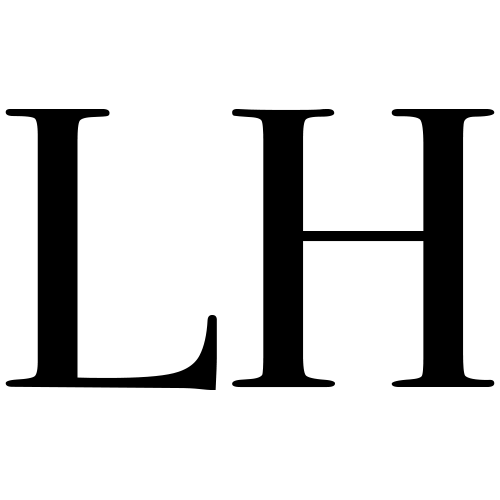
<style>
.page{position:relative;width:500px;height:500px;background:#ffffff}
.page>*{position:absolute;margin:0}
.t1{font:400px "BodoniSvtyTwoITCTT-Book";color:#000000}
</style>
<div class="page">
<p class="t1" style="left:5px;top:109px;width:490px;height:281px">LH</p>
</div>
